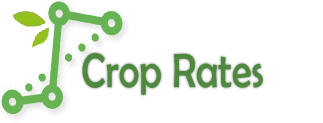
<style>
.page{position:relative;width:323px;height:123px;background:#ffffff}
.page>*{position:absolute;margin:0}
.t1{font:48.7px "BerlinSansFB-Reg";color:#4f8940;scale:0.83 1}
</style>
<div class="page">
<p class="t1" style="left:82px;top:53px;width:181px;height:42px">Crop Rates</p>
</div>
